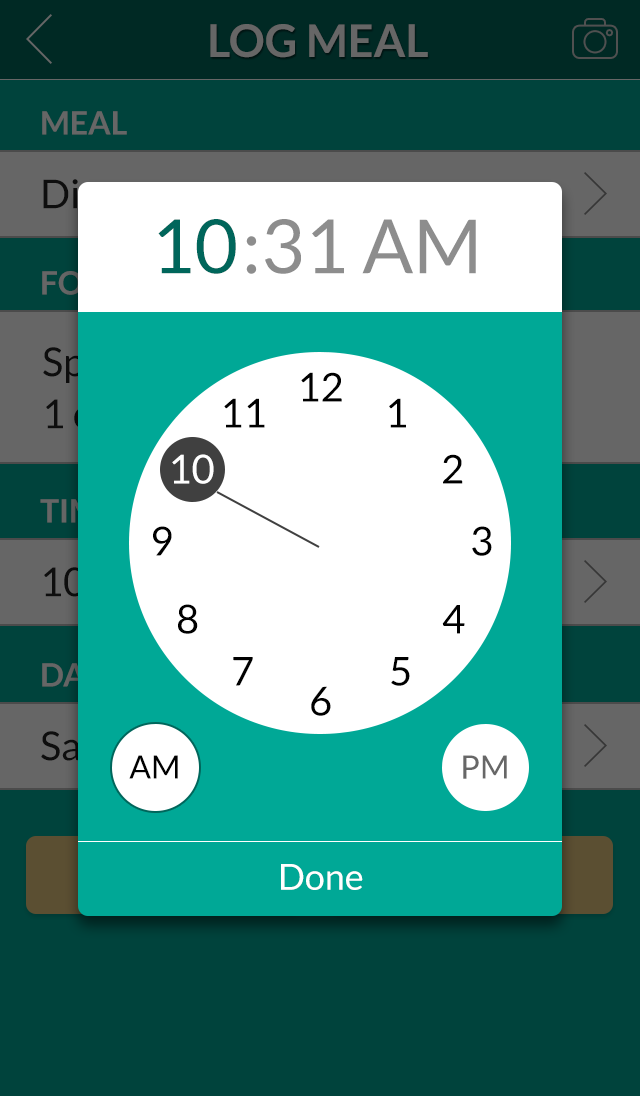
<style>
.page{position:relative;width:640px;height:1096px;background:#00433c}
.page>*{position:absolute;margin:0}
.t1{font:45px "Lato-Bold";color:#666666}
.t2{font:32px "Lato-Bold";color:#666666}
.t3{font:75px "Lato-Regular";color:#00665b}
.t4{font:75px "Lato-Regular";color:#8d8d8d}
.t5{font:40px "Lato-Regular";color:#000000}
.t6{font:40px "Lato-Regular";color:#ffffff}
.t7{font:32px "Lato-Bold"}
.t8{font:32px "Lato-Regular";color:#000000}
.t9{font:32px "Lato-Regular";color:#676767}
.t10{font:36px "Lato-Regular";color:#ffffff}
</style>
<div class="page">
<p class="t1" style="left:210px;top:24px;width:218px;height:34px">LOG MEAL</p>
<p class="t2" style="left:42px;top:111px;width:85px;height:24px">MEAL</p>
<p class="t3" style="left:158px;top:219px;width:78px;height:55px">10</p>
<p class="t4" style="left:246px;top:219px;width:230px;height:55px">:31 AM</p>
<p class="t5" style="left:301px;top:372px;width:41px;height:30px">12</p>
<p class="t5" style="left:224px;top:398px;width:41px;height:30px">11</p>
<p class="t5" style="left:389px;top:398px;width:17px;height:30px">1</p>
<p class="t6" style="left:172px;top:454px;width:42px;height:30px">10</p>
<p class="t5" style="left:443px;top:454px;width:20px;height:30px">2</p>
<p class="t7" style="left:40px;top:499px;width:76px;height:24px">TIME</p>
<p class="t5" style="left:153px;top:526px;width:19px;height:30px">9</p>
<p class="t5" style="left:472px;top:526px;width:20px;height:30px">3</p>
<p class="t5" style="left:178px;top:604px;width:20px;height:30px">8</p>
<p class="t5" style="left:442px;top:605px;width:23px;height:29px">4</p>
<p class="t7" style="left:42px;top:663px;width:78px;height:24px">DATE</p>
<p class="t5" style="left:233px;top:657px;width:20px;height:29px">7</p>
<p class="t5" style="left:391px;top:657px;width:19px;height:29px">5</p>
<p class="t5" style="left:311px;top:686px;width:20px;height:30px">6</p>
<p class="t8" style="left:129px;top:755px;width:49px;height:24px">AM</p>
<p class="t9" style="left:463px;top:755px;width:44px;height:24px">PM</p>
<p class="t10" style="left:281px;top:864px;width:82px;height:26px">Done</p>
</div>
